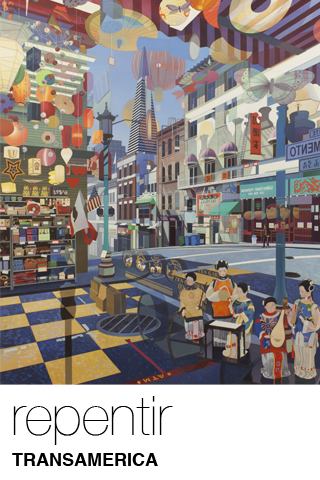
<style>
.page{position:relative;width:320px;height:480px}
.page>*{position:absolute;margin:0}
.t1{font:55px "HelveticaNeue-UltraLight";color:#000000}
.t2{font:18px "Helvetica-Bold";color:#000000}
</style>
<div class="page">
<p class="t1" style="left:13px;top:396px;width:160px;height:49px">repentir</p>
<p class="t2" style="left:12px;top:453px;width:146px;height:13px">TRANSAMERICA</p>
</div>
